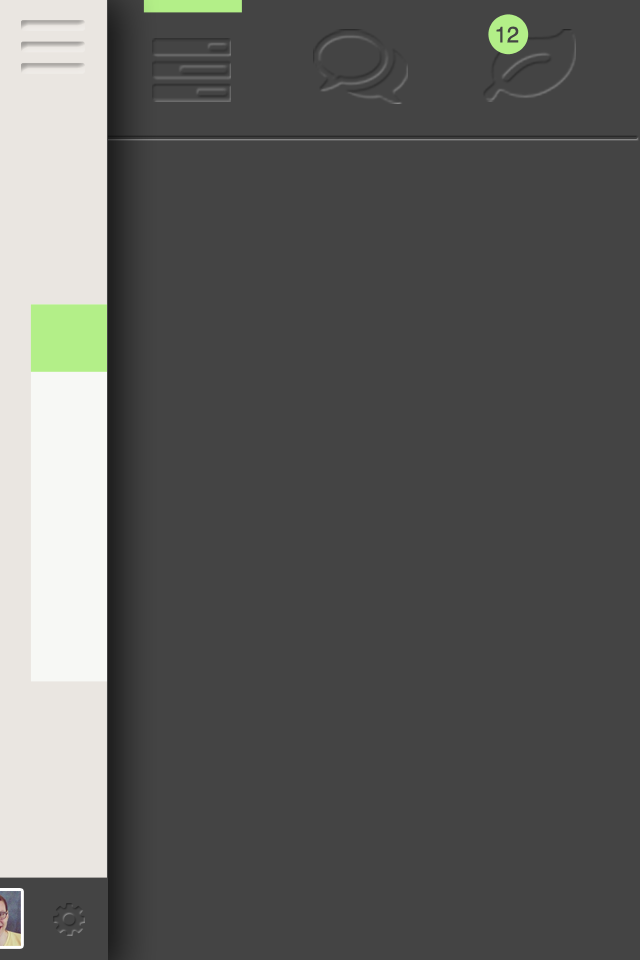
<style>
.page{position:relative;width:640px;height:960px;background:#444444}
.page>*{position:absolute;margin:0}
.t1{font:22.1px "Helvetica";color:#444444}
</style>
<div class="page">
<p class="t1" style="left:496px;top:26px;width:23px;height:17px">12</p>
</div>
